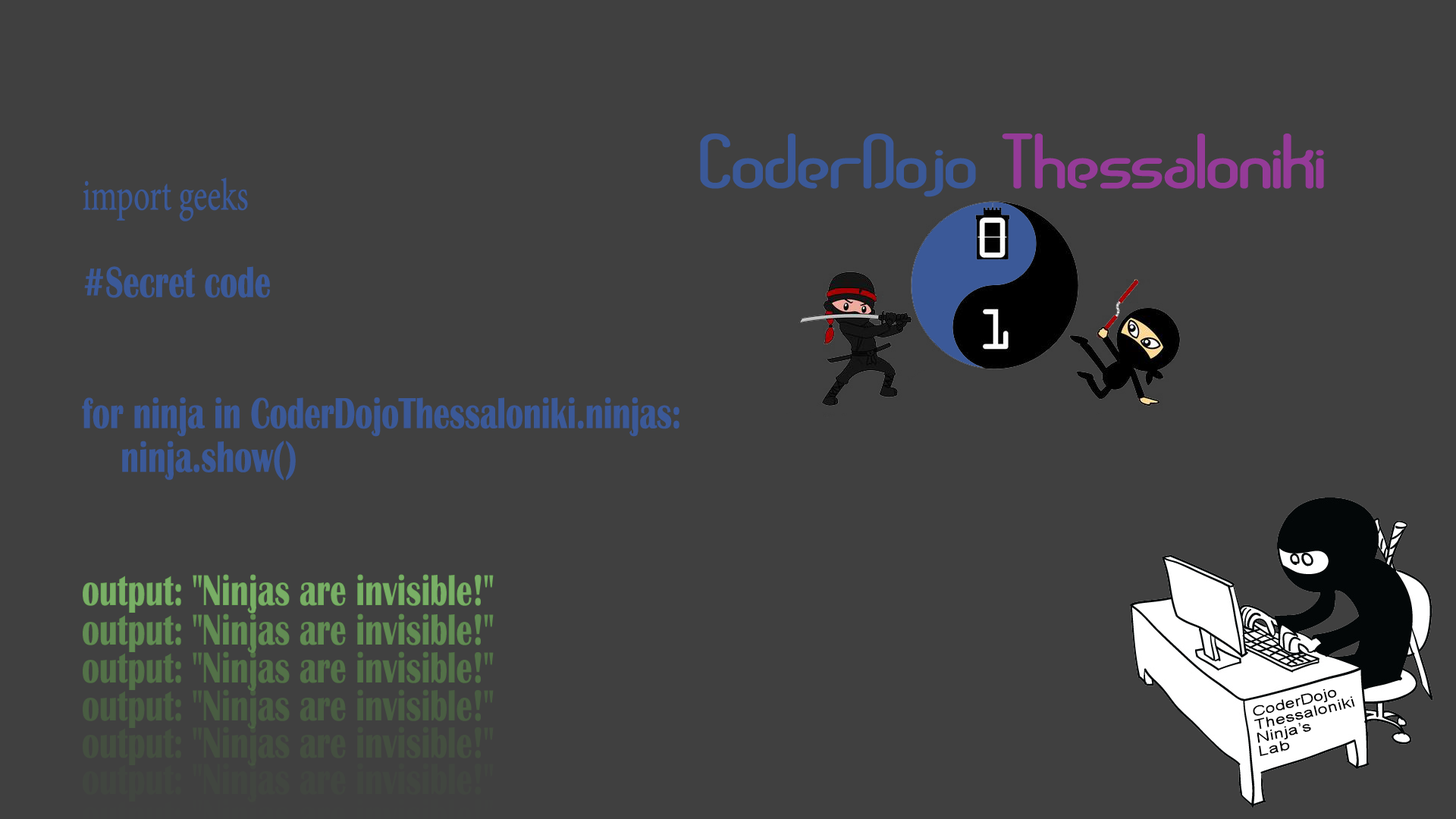
<style>
.page{position:relative;width:1456px;height:819px;background:#404040}
.page>*{position:absolute;margin:0}
.t1{font:67.2px "TelephasicBRK";color:#953b98;scale:0.72 1}
.t2{font:67.2px "TelephasicBRK";color:#3b5998;scale:0.72 1}
.t3{font:44.8px "BritannicBold";color:#3b5998;scale:0.72 1}
.t4{font:44.8px "MinionPro-Regular";color:#3b5998;scale:0.72 1}
.t5{font:44.8px "BritannicBold";color:#79af66;scale:0.72 1}
.t6{font:44.8px "BritannicBold";color:#628c54;scale:0.72 1}
.t7{font:44.8px "BritannicBold";color:#537148;scale:0.72 1}
.t8{font:44.8px "BritannicBold";color:#495d42;scale:0.72 1}
.t9{font:13.9px "ArialMT";color:#000000;scale:1.35 1}
.t10{font:44.8px "BritannicBold";color:#444f40;scale:0.72 1}
.t11{font:44.8px "BritannicBold";color:#414640;scale:0.72 1}
</style>
<div class="page">
<p class="t1" style="left:700px;top:133px;width:624px;height:64px"><span class="t2">CoderDojo </span>Thessaloniki</p>
<p class="t3" style="left:82px;top:177px;width:597px;height:304px"><span class="t4">import geeks<br></span><br>#Secret code<br><br><br>for ninja in CoderDojoThessaloniki.ninjas:<br>    ninja.show()</p>
<p class="t5" style="left:83px;top:574px;width:411px;height:39px">output: "Ninjas are invisible!"</p>
<p class="t6" style="left:83px;top:613px;width:411px;height:40px">output: "Ninjas are invisible!"</p>
<p class="t7" style="left:83px;top:651px;width:411px;height:40px">output: "Ninjas are invisible!"</p>
<p class="t8" style="left:83px;top:689px;width:411px;height:40px">output: "Ninjas are invisible!"</p>
<p class="t9" style="left:1253px;top:689px;width:102px;height:67px;rotate:-13deg">CoderDojo<br>Thessaloniki<br>Ninja’s<br>Lab</p>
<p class="t10" style="left:83px;top:726px;width:411px;height:40px">output: "Ninjas are invisible!"</p>
<p class="t11" style="left:83px;top:763px;width:411px;height:39px">output: "Ninjas are invisible!"</p>
</div>
